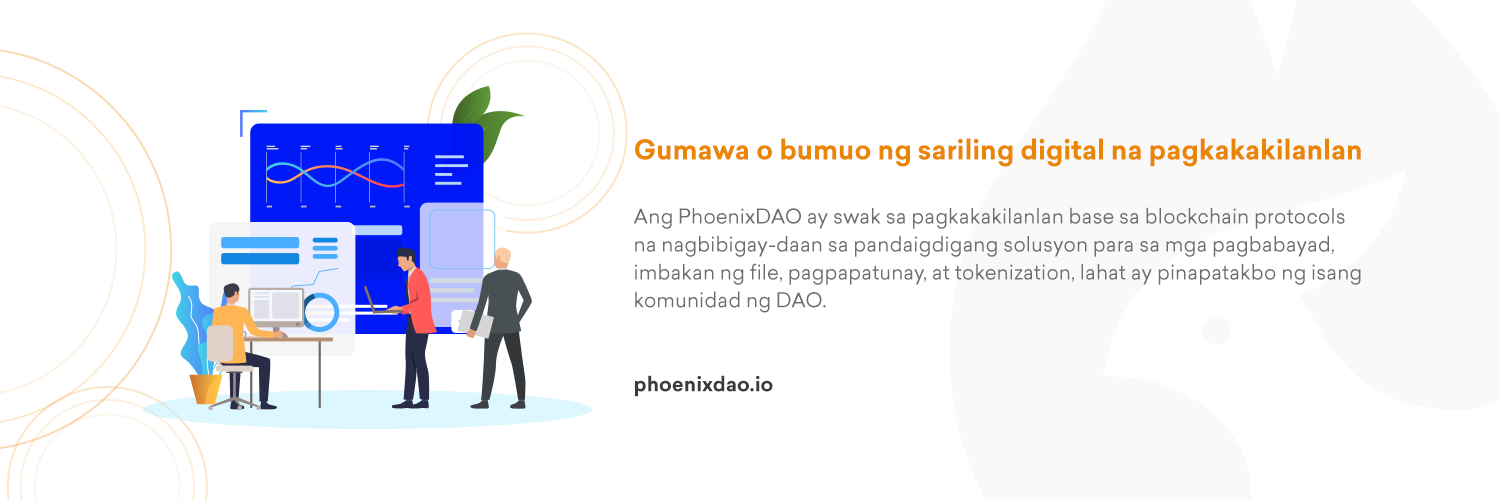
<style>
.page{position:relative;width:1500px;height:500px;background:#ffffff}
.page>*{position:absolute;margin:0}
.t1{font:26.9px "Sailec-Bold";color:#ea8604}
.t2{font:20px/28px "Sailec-Regular";color:#6d6d6d}
.t3{font:20px "Sailec-Bold";color:#3b3b3b}
</style>
<div class="page">
<p class="t1" style="left:635px;top:138px;width:726px;height:29px">Gumawa o bumuo ng sariling digital na pagkakakilanlan</p>
<p class="t2" style="left:633px;top:207px;width:728px;height:106px">Ang PhoenixDAO ay swak sa pagkakakilanlan base sa blockchain protocols<br>na nagbibigay-daan sa pandaigdigang solusyon para sa mga pagbabayad,<br>imbakan ng file, pagpapatunay, at tokenization, lahat ay pinapatakbo ng isang<br>komunidad ng DAO.</p>
<p class="t3" style="left:635px;top:375px;width:138px;height:22px">phoenixdao.io</p>
</div>
